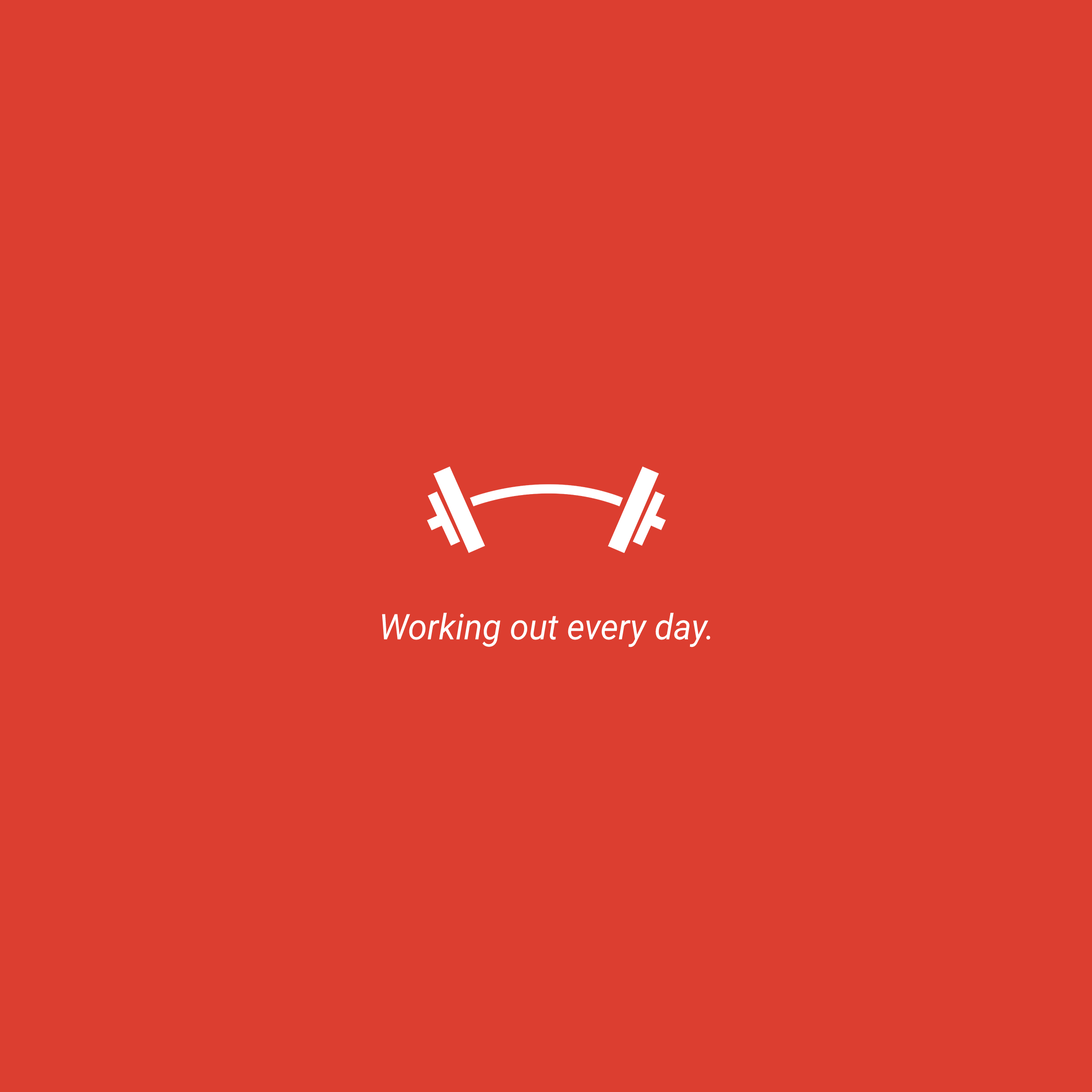
<style>
.page{position:relative;width:1092px;height:1092px;background:#dc3e30}
.page>*{position:absolute;margin:0}
.t1{font:35.4px "Roboto-Italic";color:#ffffff;scale:0.97 1}
</style>
<div class="page">
<p class="t1" style="left:382px;top:613px;width:328px;height:34px">Working out every day.</p>
</div>
